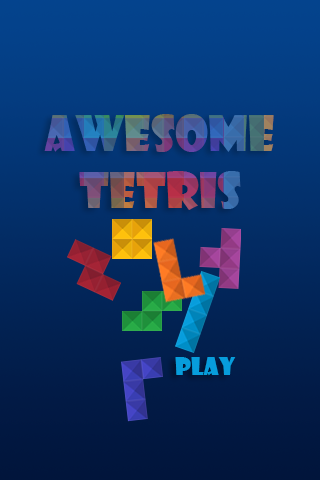
<style>
.page{position:relative;width:320px;height:480px}
.page>*{position:absolute;margin:0}
.t1{font:48px "ShowcardGothic-Reg"}
.t2{font:24px "ShowcardGothic-Reg";color:#079ddc}
</style>
<div class="page">
<p class="t1" style="left:44px;top:114px;width:230px;height:96px;text-align:center">AWESOME<br>TETRIs</p>
<p class="t2" style="left:175px;top:357px;width:61px;height:19px">play</p>
</div>
